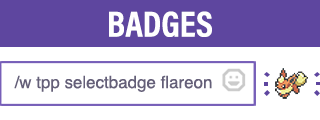
<style>
.page{position:relative;width:320px;height:120px;background:#ffffff}
.page>*{position:absolute;margin:0}
.t1{font:36.3px "AcuminProCond-Bold";color:#ffffff;text-transform:uppercase}
.t2{font:16.8px "Helvetica";color:#645f78}
</style>
<div class="page">
<p class="t1" style="left:109px;top:11px;width:103px;height:26px">Badges</p>
<p class="t2" style="left:14px;top:75px;width:198px;height:17px">/w tpp selectbadge flareon</p>
</div>
